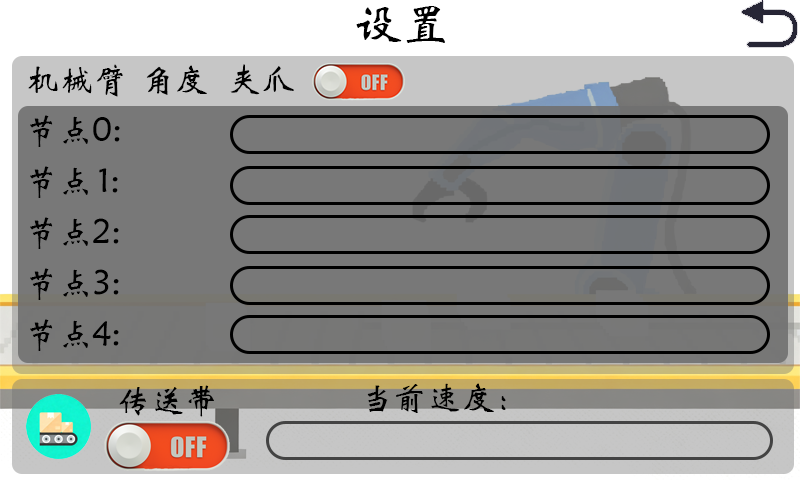
<style>
.page{position:relative;width:800px;height:480px;background:#787878}
.page>*{position:absolute;margin:0}
.t1{font:48px "STXinwei";color:#000000}
.t2{font:34px "STXinwei";color:#000000}
</style>
<div class="page">
<p class="t1" style="left:356px;top:6px;width:89px;height:37px">设置</p>
<p class="t2" style="left:28px;top:64px;width:95px;height:33px">机械臂</p>
<p class="t2" style="left:146px;top:65px;width:61px;height:30px">角度</p>
<p class="t2" style="left:230px;top:64px;width:64px;height:31px">夹爪</p>
<p class="t2" style="left:30px;top:115px;width:90px;height:32px">节点0:</p>
<p class="t2" style="left:30px;top:166px;width:88px;height:32px">节点 1:</p>
<p class="t2" style="left:30px;top:217px;width:89px;height:32px">节点2:</p>
<p class="t2" style="left:30px;top:268px;width:89px;height:32px">节点3:</p>
<p class="t2" style="left:30px;top:319px;width:89px;height:32px">节点4:</p>
<p class="t2" style="left:119px;top:385px;width:95px;height:32px">传送带</p>
<p class="t2" style="left:367px;top:383px;width:139px;height:30px">当前速度：</p>
</div>
